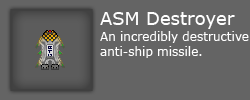
<style>
.page{position:relative;width:250px;height:100px;background:#646464}
.page>*{position:absolute;margin:0}
.t1{font:18px "Verdana";color:#ffffff}
.t2{font:12px "Verdana";color:#ffffff}
</style>
<div class="page">
<p class="t1" style="left:100px;top:12px;width:135px;height:17px">ASM Destroyer</p>
<p class="t2" style="left:100px;top:31px;width:149px;height:27px">An incredibly destructive anti-ship missile.</p>
</div>
